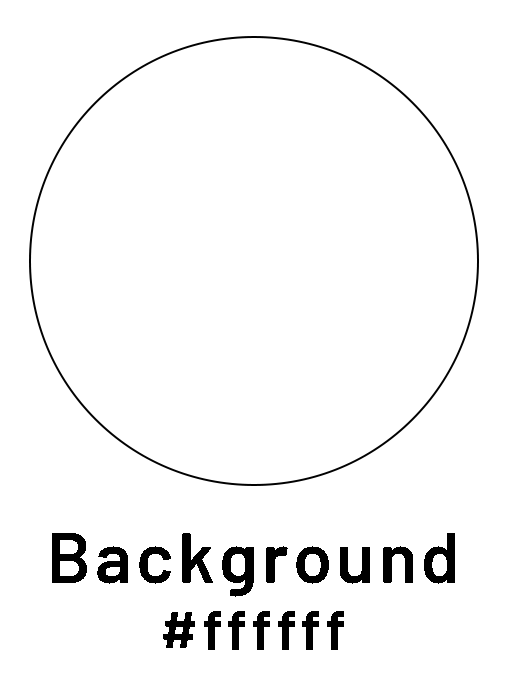
<style>
.page{position:relative;width:509px;height:697px;background:#ffffff}
.page>*{position:absolute;margin:0}
.t1{font:70.6px "Barlow-SemiBold";letter-spacing:0.06em;color:#000000}
.t2{font:56.4px "Barlow-SemiBold";letter-spacing:0.06em;color:#000000}
</style>
<div class="page">
<p class="t1" style="left:52px;top:533px;width:403px;height:64px">Background</p>
<p class="t2" style="left:163px;top:611px;width:181px;height:39px">#ffffff</p>
</div>
